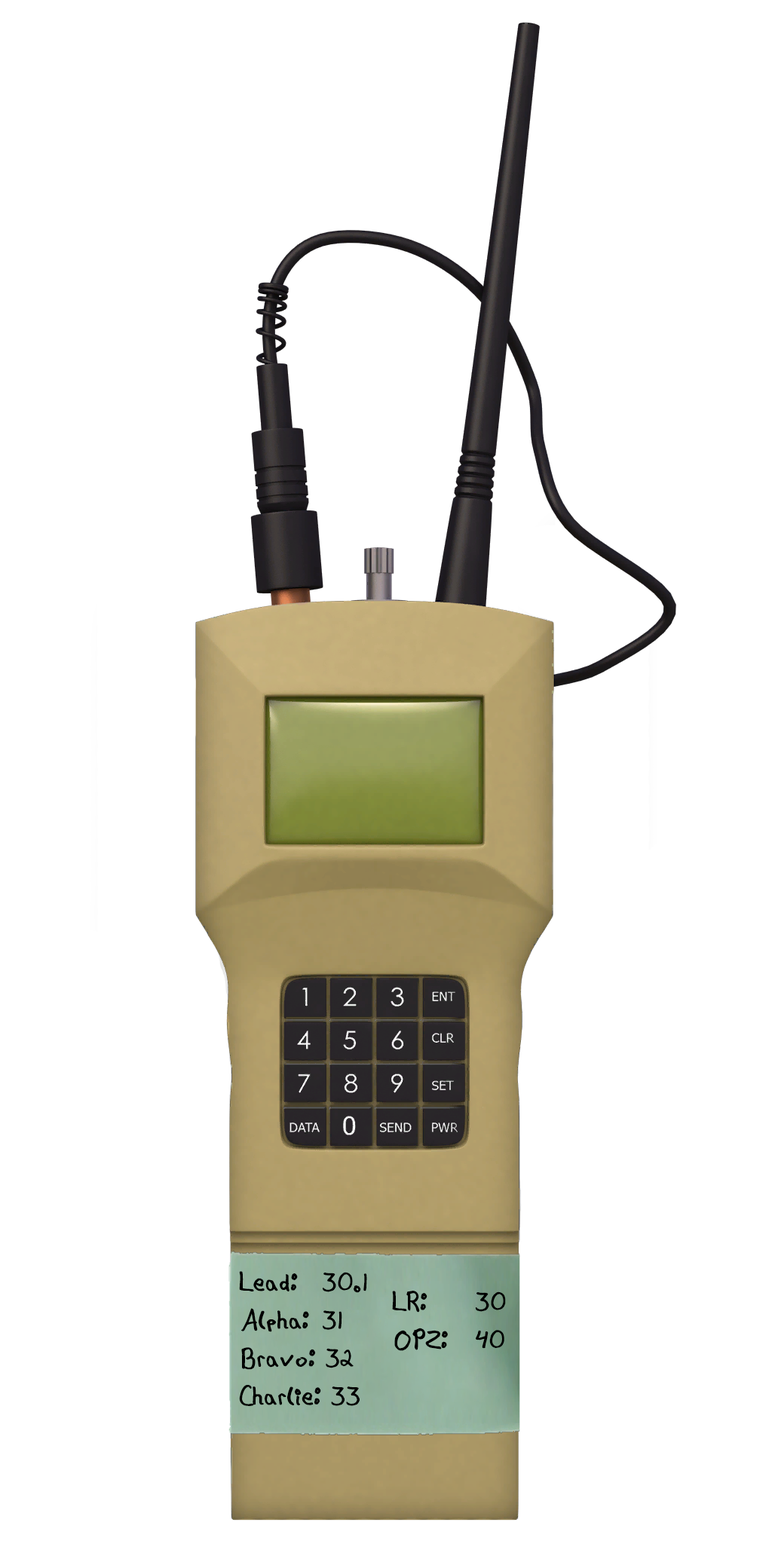
<style>
.page{position:relative;width:772px;height:1544px;background:#ffffff}
.page>*{position:absolute;margin:0}
.t1{font:31.7px "Hipchick";color:#000000}
</style>
<div class="page">
<p class="t1" style="left:239px;top:1271px;width:128px;height:135px">Lead:  30.1<br>Alpha:  31<br>Bravo: 32<br>Charlie: 33</p>
<p class="t1" style="left:392px;top:1291px;width:114px;height:60px">LR:  30<br>OPZ: 40</p>
</div>
